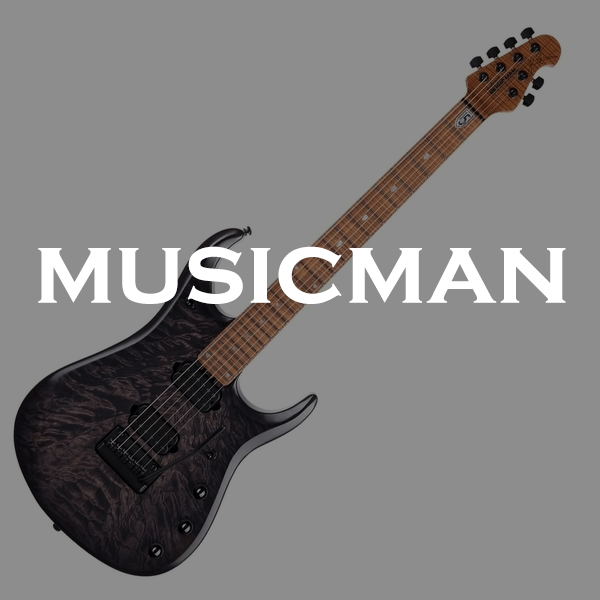
<style>
.page{position:relative;width:600px;height:600px;background:#8d8d8d}
.page>*{position:absolute;margin:0}
.t1{font:100px "CopperplateGothic-Bold";color:#ffffff}
</style>
<div class="page">
<p class="t1" style="left:38px;top:246px;width:528px;height:58px">musicman</p>
</div>
